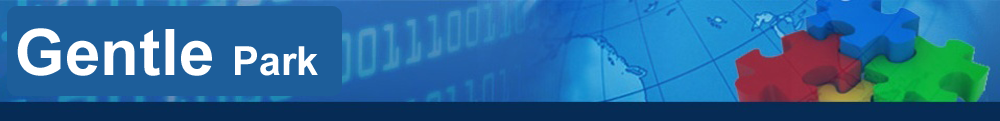
<style>
.page{position:relative;width:1000px;height:121px;background:#1d5e9a}
.page>*{position:absolute;margin:0}
.t1{font:64px "Arial-BoldMT";color:#ffffff}
.t2{font:40px "Arial-BoldMT";color:#ffffff}
</style>
<div class="page">
<p class="t1" style="left:17px;top:28px;width:301px;height:48px">Gentle <span class="t2">Park</span></p>
</div>
